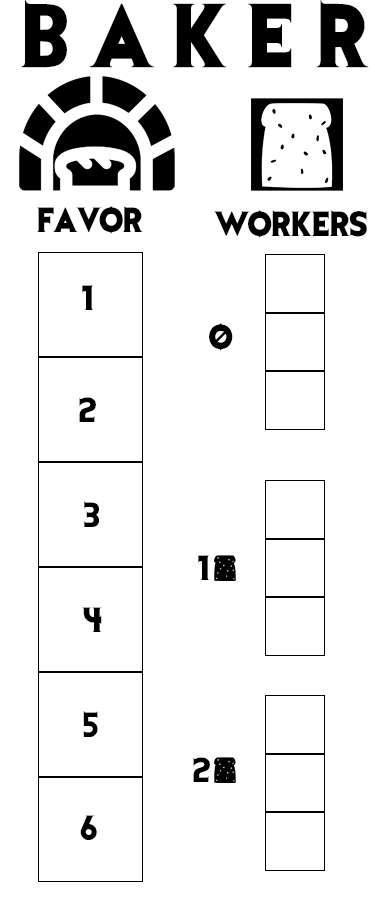
<style>
.page{position:relative;width:375px;height:900px;background:#ffffff}
.page>*{position:absolute;margin:0}
.t1{font:75px "EvilDead";letter-spacing:0.3em;color:#000000}
.t2{font:29.2px "EvilDead";color:#000000}
</style>
<div class="page">
<p class="t1" style="left:21px;top:0px;width:348px;height:68px">BAKER</p>
<p class="t2" style="left:37px;top:206px;width:106px;height:28px">FAVOR</p>
<p class="t2" style="left:213px;top:210px;width:154px;height:28px">WORKERS</p>
<p class="t2" style="left:82px;top:285px;width:12px;height:25px">1</p>
<p class="t2" style="left:209px;top:323px;width:24px;height:28px">0</p>
<p class="t2" style="left:79px;top:397px;width:17px;height:25px">2</p>
<p class="t2" style="left:84px;top:501px;width:15px;height:26px">3</p>
<p class="t2" style="left:198px;top:555px;width:12px;height:25px">1</p>
<p class="t2" style="left:82px;top:607px;width:20px;height:25px">4</p>
<p class="t2" style="left:83px;top:711px;width:15px;height:26px">5</p>
<p class="t2" style="left:193px;top:757px;width:17px;height:25px">2</p>
<p class="t2" style="left:80px;top:815px;width:17px;height:25px">6</p>
</div>
